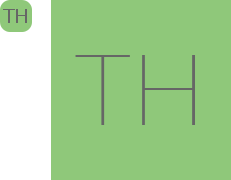
<style>
.page{position:relative;width:231px;height:180px;background:#8fc87a}
.page>*{position:absolute;margin:0}
.t1{font:20px "Lato-Regular";color:#666666}
.t2{font:100px "Lato-Thin";color:#666666}
</style>
<div class="page">
<p class="t1" style="left:3px;top:9px;width:24px;height:14px">TH</p>
<p class="t2" style="left:75px;top:55px;width:120px;height:70px">TH</p>
</div>
